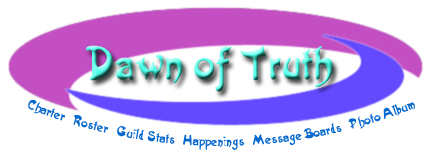
<style>
.page{position:relative;width:434px;height:152px;background:#ffffff}
.page>*{position:absolute;margin:0}
.t1{font:48px "Artistik"}
.t2{font:14px "Artistik";color:#0768cd}
</style>
<div class="page">
<p class="t1" style="left:86px;top:45px;width:247px;height:47px">Dawn of Truth</p>
<p class="t2" style="left:28px;top:100px;width:387px;height:50px">Charter   Roster   Guild Stats   Happenings   Message Boards   Photo Album</p>
</div>
